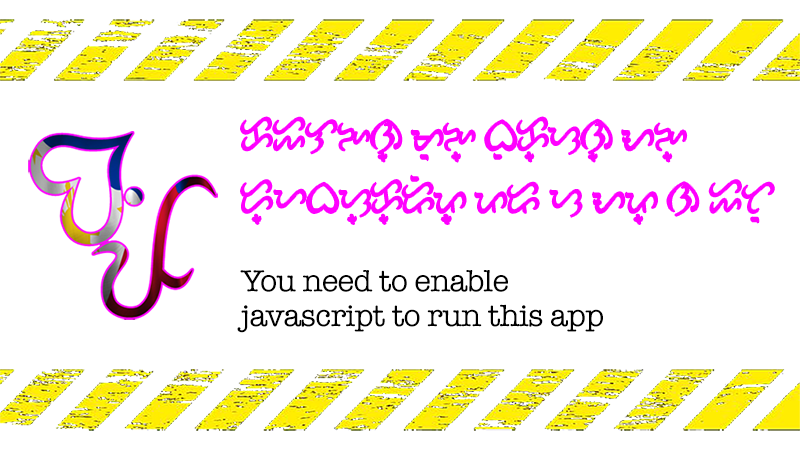
<style>
.page{position:relative;width:800px;height:450px;background:#ffffff}
.page>*{position:absolute;margin:0}
.t1{font:56.2px/62.7px "BaybayinModernScript";letter-spacing:-0.02em;color:#ff00ff;scale:0.81 1}
.t2{font:31.3px/34.8px "AmericanTypewriter";letter-spacing:-0.02em;color:#000000}
</style>
<div class="page">
<p class="t1" style="left:241px;top:117px;width:533px;height:107px">kIlNn= moN= buk=sn= aN=<br>jbs=k=rip== pr s Ap= n Ito</p>
<p class="t2" style="left:237px;top:270px;width:366px;height:63px">You need to enable<br>javascript to run this app</p>
</div>
